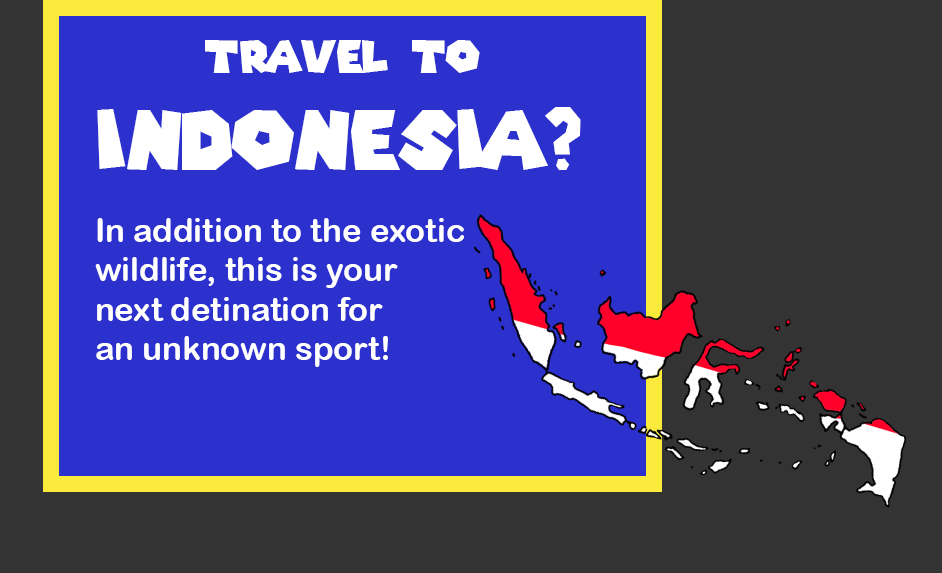
<style>
.page{position:relative;width:942px;height:573px;background:#333333}
.page>*{position:absolute;margin:0}
.t1{font:81.1px "SuperMarioGalaxy";color:#ffffff}
.t2{font:43.6px "SuperMarioGalaxy";color:#ffffff}
.t3{font:32.8px "ArialRoundedMTBold";color:#ffffff}
</style>
<div class="page">
<p class="t1" style="left:97px;top:40px;width:484px;height:130px;text-align:center"><span class="t2">Travel to <br></span>indonesia?</p>
<p class="t3" style="left:95px;top:218px;width:369px;height:149px">In addition to the exotic <br>wildlife, this is your <br>next detination for <br>an unknown sport!</p>
</div>
